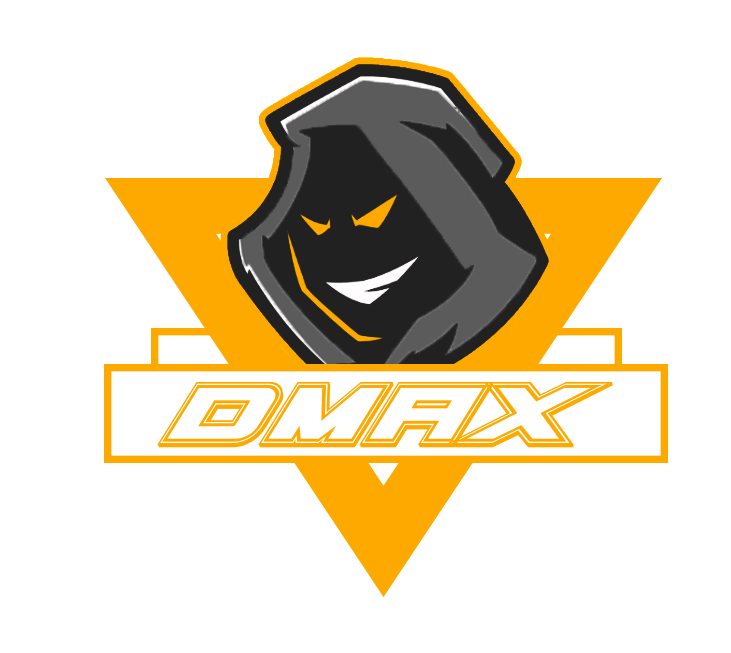
<style>
.page{position:relative;width:731px;height:653px;background:#ffffff}
.page>*{position:absolute;margin:0}
.t1{font:112px "TarrgetEngravedItalic";color:#fda900}
</style>
<div class="page">
<p class="t1" style="left:157px;top:381px;width:457px;height:67px">dmax</p>
</div>
